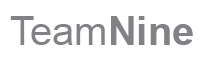
<style>
.page{position:relative;width:208px;height:60px;background:#ffffff}
.page>*{position:absolute;margin:0}
.t1{font:40px "ArialMT";color:#818285}
.t2{font:40px "Arial-BoldMT";color:#818285}
</style>
<div class="page">
<p class="t1" style="left:10px;top:16px;width:183px;height:29px">Team<span class="t2">Nine</span></p>
</div>
